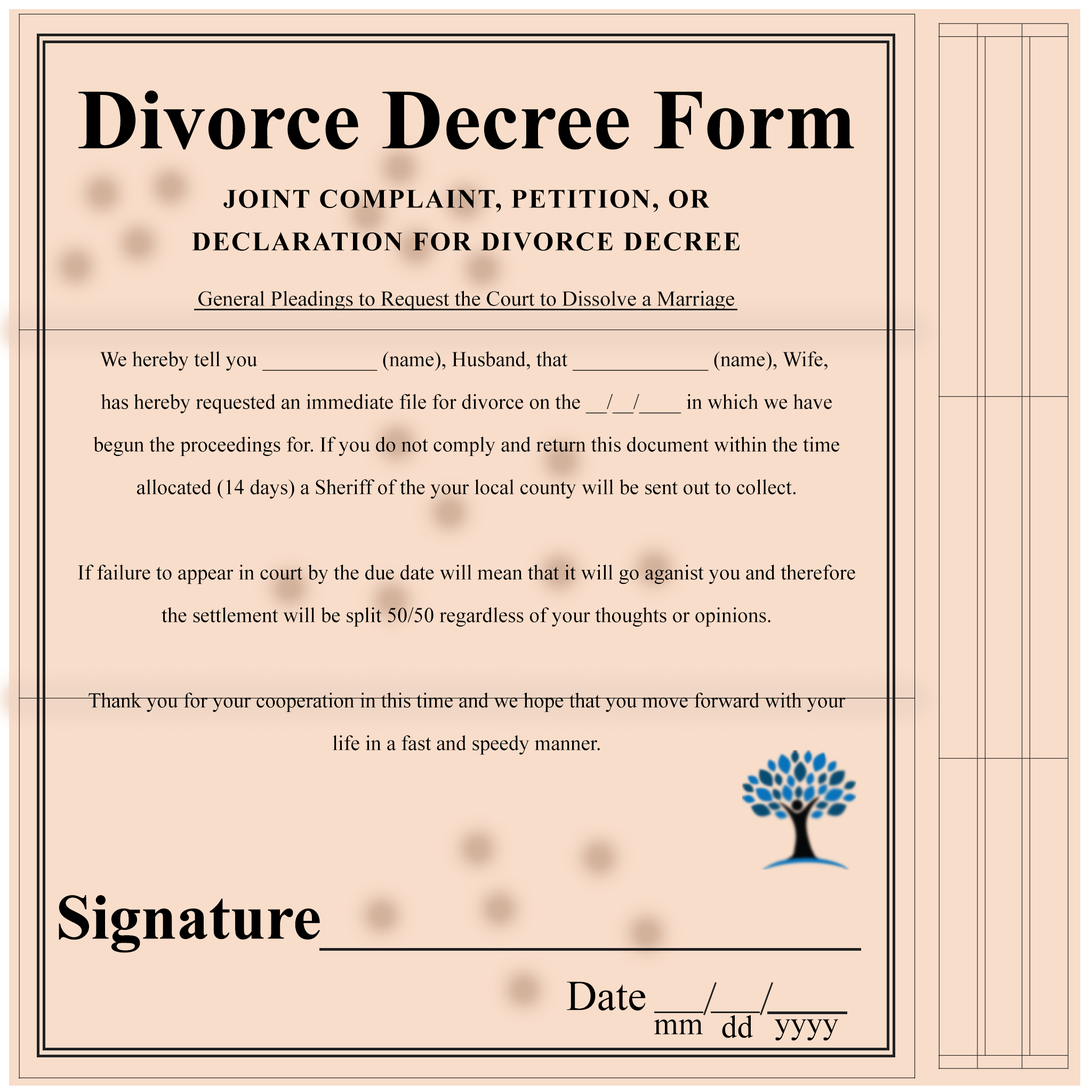
<style>
.page{position:relative;width:1092px;height:1092px;background:#f8ddca}
.page>*{position:absolute;margin:0}
.t1{font:85.3px "TimesNewRomanPS-BoldMT";color:#000000}
.t2{font:26.7px/42.7px "TimesNewRomanPS-BoldMT";letter-spacing:0.05em;color:#000000}
.t3{font:21.3px "TimesNewRomanPSMT";color:#000000}
.t4{font:21.3px/42.7px "TimesNewRomanPSMT";color:#000000}
.t5{font:64px "TimesNewRomanPS-BoldMT";color:#000000}
.t6{font:42.7px "TimesNewRomanPSMT";color:#000000}
.t7{font:32px "TimesNewRomanPSMT";color:#000000}
</style>
<div class="page">
<p class="t1" style="left:78px;top:90px;width:776px;height:60px">Divorce Decree Form</p>
<p class="t2" style="left:192px;top:189px;width:548px;height:62px;text-align:center">JOINT COMPLAINT, PETITION, OR<br>DECLARATION FOR DIVORCE DECREE</p>
<p class="t3" style="left:198px;top:291px;width:536px;height:19px">General Pleadings to Request the Court to Dissolve a Marriage</p>
<p class="t4" style="left:78px;top:351px;width:777px;height:404px;text-align:center">We hereby tell you ___________ (name), Husband, that _____________ (name), Wife, <br>has hereby requested an immediate file for divorce on the __/__/____ in which we have<br>begun the proceedings for. If you do not comply and return this document within the time<br>allocated (14 days) a Sheriff of the your local county will be sent out to collect.<br><br>If failure to appear in court by the due date will mean that it will go aganist you and therefore<br>the settlement will be split 50/50 regardless of your thoughts or opinions.<br><br>Thank you for your cooperation in this time and we hope that you move forward with your<br>life in a fast and speedy manner.</p>
<p class="t5" style="left:59px;top:895px;width:261px;height:58px">Signature</p>
<p class="t6" style="left:567px;top:982px;width:79px;height:29px">Date</p>
<p class="t7" style="left:654px;top:1019px;width:49px;height:15px">mm</p>
<p class="t7" style="left:722px;top:1015px;width:31px;height:23px">dd</p>
<p class="t7" style="left:775px;top:1019px;width:63px;height:22px">yyyy</p>
</div>
